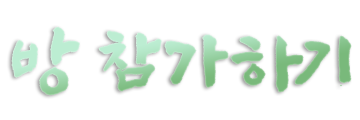
<style>
.page{position:relative;width:360px;height:120px;background:#ffffff}
.page>*{position:absolute;margin:0}
.t1{font:77.3px "SangSangRockOTF";letter-spacing:0.04em}
.t2{font:77.3px "SangSangRockOTF";letter-spacing:0.26em}
.t3{font:70.3px "SangSangRockOTF";letter-spacing:-0.12em}
.t4{font:77.3px "SangSangRockOTF";letter-spacing:0.12em}
</style>
<div class="page">
<p class="t1" style="left:12px;top:27px;width:339px;height:68px"><span class="t2">방</span>참가<span class="t3">하</span><span class="t4">기</span></p>
</div>
